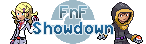
<style>
.page{position:relative;width:146px;height:44px;background:#ffffff}
.page>*{position:absolute;margin:0}
.t1{font:20px "8514oem"}
.t2{font:22px "8514oem";color:#1e608d}
</style>
<div class="page">
<p class="t1" style="left:60px;top:6px;width:27px;height:12px">FnF</p>
<p class="t2" style="left:33px;top:22px;width:80px;height:12px">Showdown</p>
</div>
